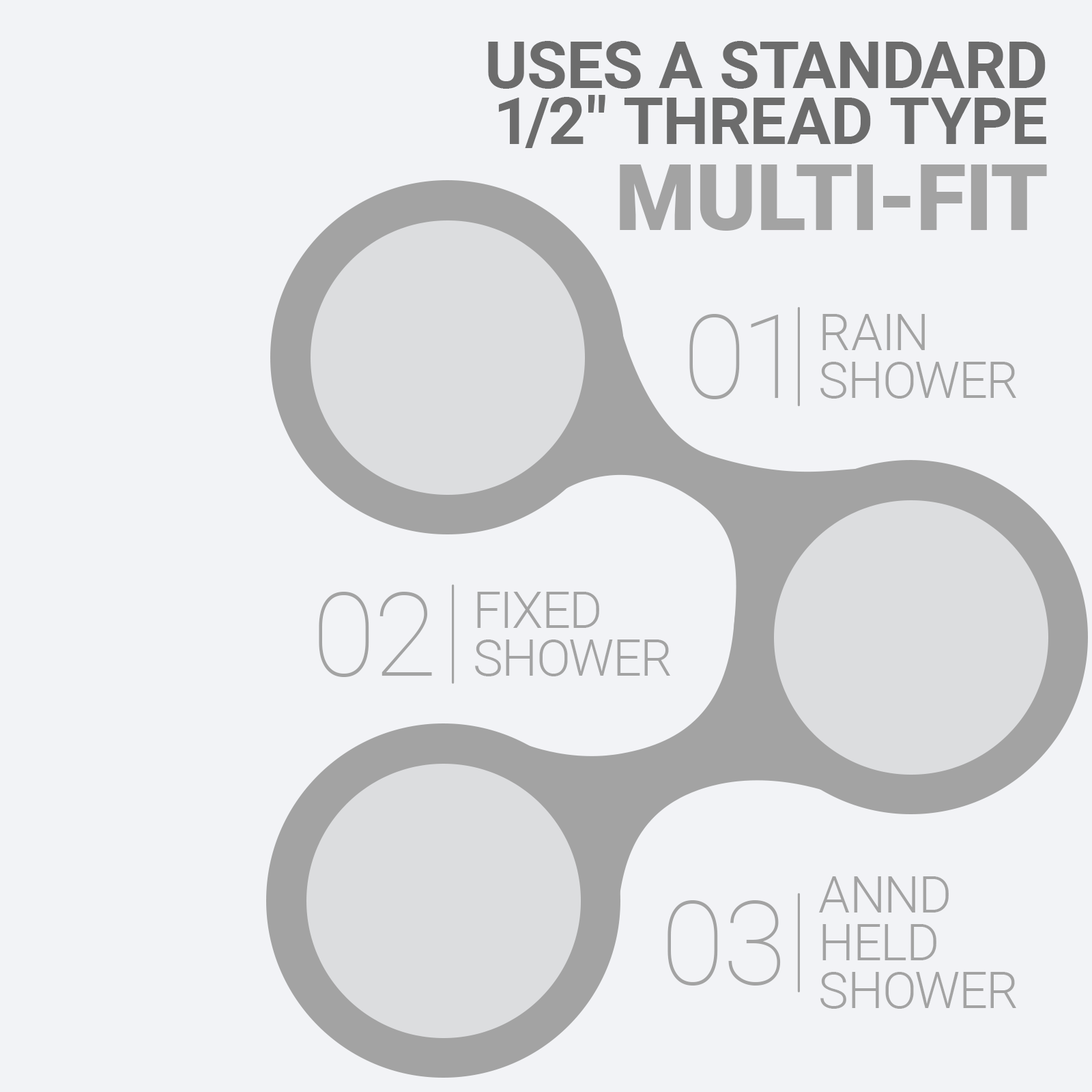
<style>
.page{position:relative;width:1092px;height:1092px;background:#f2f3f6}
.page>*{position:absolute;margin:0}
.t1{font:65.4px/56.1px "Roboto-Bold";color:#6c6c6c}
.t2{font:92px "Roboto-Black";color:#a3a3a3}
.t3{font:116.7px "Roboto-Thin";color:#a3a3a3}
.t4{font:50.5px/47.8px "Roboto-Light";color:#a3a3a3}
</style>
<div class="page">
<p class="t1" style="left:488px;top:41px;width:558px;height:107px;text-align:right">USES A STANDARD<br>1/2" THREAD TYPE</p>
<p class="t2" style="left:620px;top:164px;width:427px;height:67px">MULTI-FIT</p>
<p class="t3" style="left:689px;top:314px;width:90px;height:85px">01</p>
<p class="t4" style="left:820px;top:314px;width:196px;height:85px">RAIN<br>SHOWER</p>
<p class="t3" style="left:319px;top:592px;width:113px;height:85px">02</p>
<p class="t4" style="left:475px;top:592px;width:195px;height:84px">FIXED<br>SHOWER</p>
<p class="t4" style="left:819px;top:876px;width:197px;height:133px">ANND<br>HELD<br>SHOWER</p>
<p class="t3" style="left:667px;top:900px;width:114px;height:86px">03</p>
</div>
